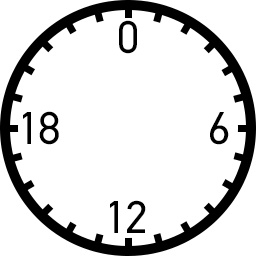
<style>
.page{position:relative;width:256px;height:256px;background:#ffffff}
.page>*{position:absolute;margin:0}
.t1{font:46px "Gidole-Regular";letter-spacing:-0.05em;color:#000000}
</style>
<div class="page">
<p class="t1" style="left:119px;top:20px;width:18px;height:34px">0</p>
<p class="t1" style="left:23px;top:111px;width:36px;height:34px">18</p>
<p class="t1" style="left:210px;top:112px;width:19px;height:33px">6</p>
<p class="t1" style="left:110px;top:200px;width:36px;height:33px">12</p>
</div>
